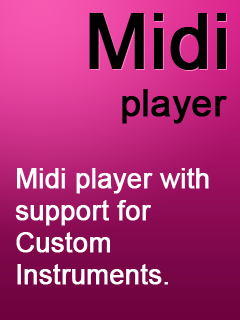
<style>
.page{position:relative;width:240px;height:320px}
.page>*{position:absolute;margin:0}
.t1{font:75.6px "ArialMT";color:#000000;font-weight:bold}
.t2{font:36.8px "ArialMT";color:#000000;font-weight:bold}
.t3{font:26.7px "ArialMT";color:#ffffff;font-weight:bold}
</style>
<div class="page">
<p class="t1" style="left:89px;top:13px;width:137px;height:57px">Midi</p>
<p class="t2" style="left:122px;top:89px;width:105px;height:35px">player</p>
<p class="t3" style="left:15px;top:168px;width:194px;height:117px">Midi player with<br>support for<br>Custom<br>Instruments.</p>
</div>
